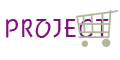
<style>
.page{position:relative;width:120px;height:60px;background:#ffffff}
.page>*{position:absolute;margin:0}
.t1{font:24.3px "H2porM";color:#820f7e}
</style>
<div class="page">
<p class="t1" style="left:6px;top:19px;width:103px;height:19px">PROJECT</p>
</div>
